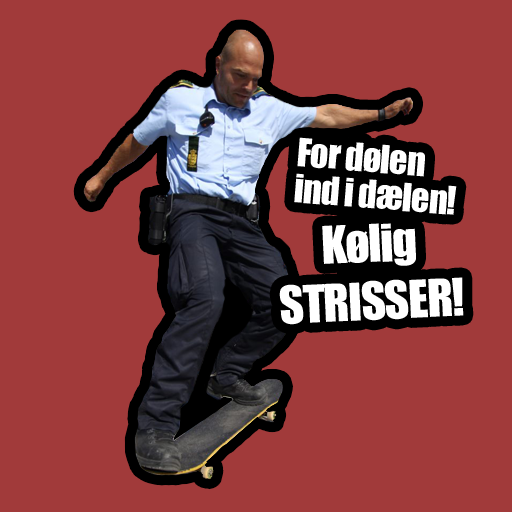
<style>
.page{position:relative;width:512px;height:512px;background:#a13a3a}
.page>*{position:absolute;margin:0}
.t1{font:36px/36px "Impact";letter-spacing:-0.025em;color:#ffffff}
.t2{font:48px "Impact";letter-spacing:-0.025em;color:#ffffff}
</style>
<div class="page">
<p class="t1" style="left:294px;top:137px;width:163px;height:78px;rotate:5deg">For dølen<br>ind i dælen!</p>
<p class="t2" style="left:279px;top:223px;width:185px;height:102px;text-align:center;rotate:-3deg">Kølig<br>STRISSER!</p>
</div>
